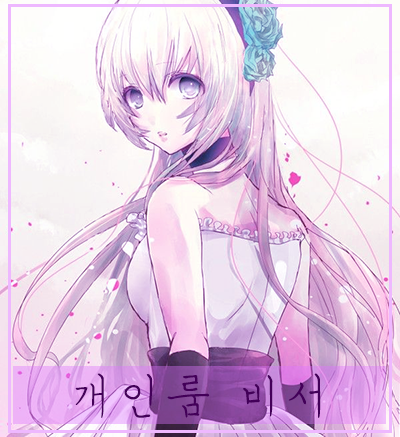
<style>
.page{position:relative;width:400px;height:437px}
.page>*{position:absolute;margin:0}
.t1{font:48px "MSugiJeong";color:#430059}
</style>
<div class="page">
<p class="t1" style="left:75px;top:373px;width:246px;height:45px">개인룸 비서</p>
</div>
